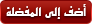
<style>
.page{position:relative;width:92px;height:24px}
.page>*{position:absolute;margin:0}
.t1{font:13px "BEsfehanBold";color:#ffffff;text-transform:uppercase}
</style>
<div class="page">
<p class="t1" style="left:6px;top:4px;width:80px;height:15px">أضف إلى المفضلة</p>
</div>
